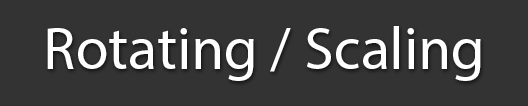
<style>
.page{position:relative;width:528px;height:106px;background:#333333}
.page>*{position:absolute;margin:0}
.t1{font:60px "MyriadPro-Regular";color:#ffffff}
</style>
<div class="page">
<p class="t1" style="left:47px;top:26px;width:434px;height:55px">Rotating / Scaling</p>
</div>
